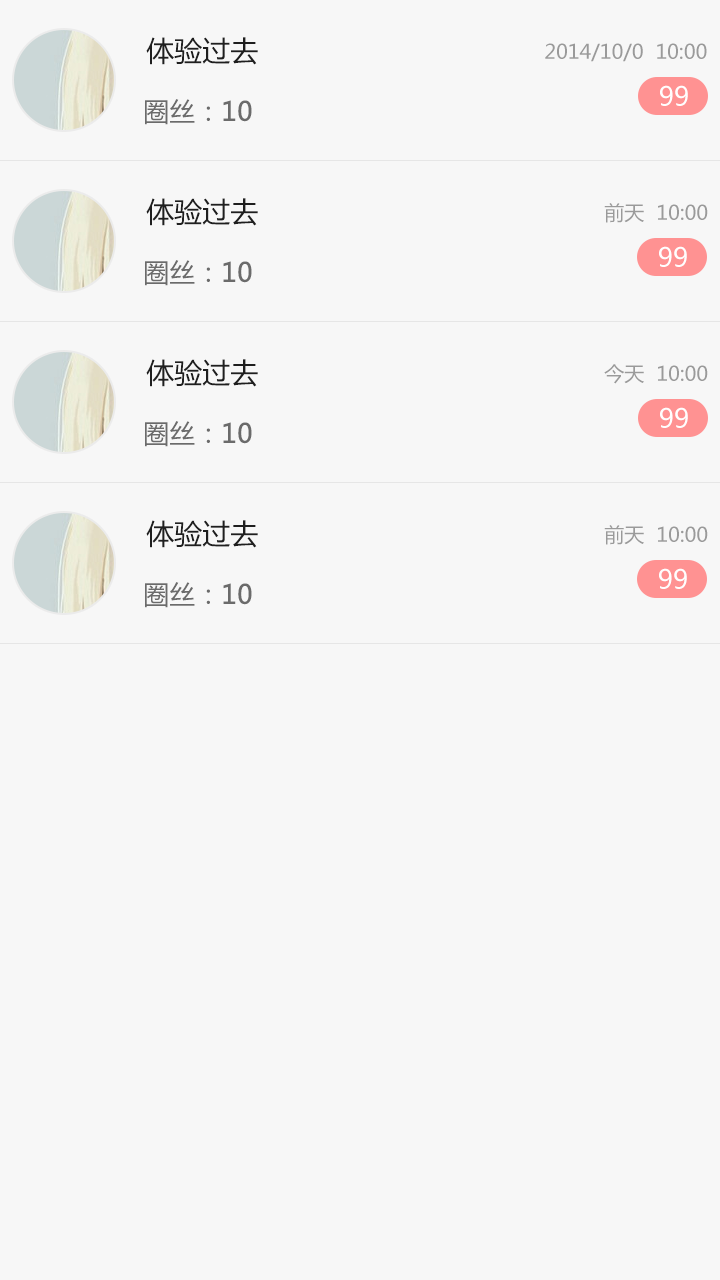
<style>
.page{position:relative;width:720px;height:1280px;background:#f7f7f7}
.page>*{position:absolute;margin:0}
.t1{font:28px "MicrosoftYaHei";color:#1f1f1f}
.t2{font:20px "MicrosoftYaHei";color:#9a9a9a}
.t3{font:26px "MicrosoftYaHei";color:#ffffff}
.t4{font:26px "MicrosoftYaHei";color:#6b6b6b}
.t5{font:26px "MicrosoftYaHei";color:#6b6b6b;font-weight:bold}
</style>
<div class="page">
<p class="t1" style="left:146px;top:37px;width:112px;height:28px">体验过去</p>
<p class="t2" style="left:545px;top:43px;width:162px;height:19px">2014/10/0  10:00</p>
<p class="t3" style="left:660px;top:85px;width:28px;height:21px">99</p>
<p class="t4" style="left:145px;top:99px;width:107px;height:26px">圈丝：<span class="t5">10</span></p>
<p class="t1" style="left:146px;top:198px;width:112px;height:28px">体验过去</p>
<p class="t2" style="left:604px;top:203px;width:104px;height:20px">前天  10:00</p>
<p class="t3" style="left:659px;top:246px;width:28px;height:21px">99</p>
<p class="t4" style="left:145px;top:260px;width:107px;height:26px">圈丝：<span class="t5">10</span></p>
<p class="t1" style="left:146px;top:359px;width:112px;height:28px">体验过去</p>
<p class="t2" style="left:604px;top:364px;width:104px;height:20px">今天  10:00</p>
<p class="t3" style="left:660px;top:407px;width:28px;height:21px">99</p>
<p class="t4" style="left:145px;top:421px;width:107px;height:26px">圈丝：<span class="t5">10</span></p>
<p class="t1" style="left:146px;top:520px;width:112px;height:28px">体验过去</p>
<p class="t2" style="left:604px;top:525px;width:104px;height:20px">前天  10:00</p>
<p class="t3" style="left:659px;top:568px;width:28px;height:21px">99</p>
<p class="t4" style="left:145px;top:582px;width:107px;height:26px">圈丝：<span class="t5">10</span></p>
</div>
